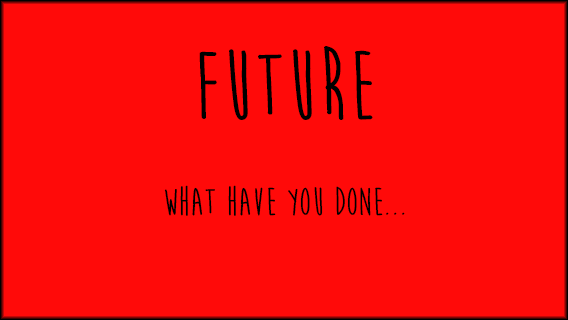
<style>
.page{position:relative;width:568px;height:320px;background:#ff0a09}
.page>*{position:absolute;margin:0}
.t1{font:40px "MoonFlowerBold";color:#000000}
.t2{font:100px "MoonFlowerBold";color:#000000}
</style>
<div class="page">
<p class="t1" style="left:164px;top:46px;width:241px;height:170px;text-align:center"><span class="t2">future<br></span><br>What have you done...</p>
</div>
